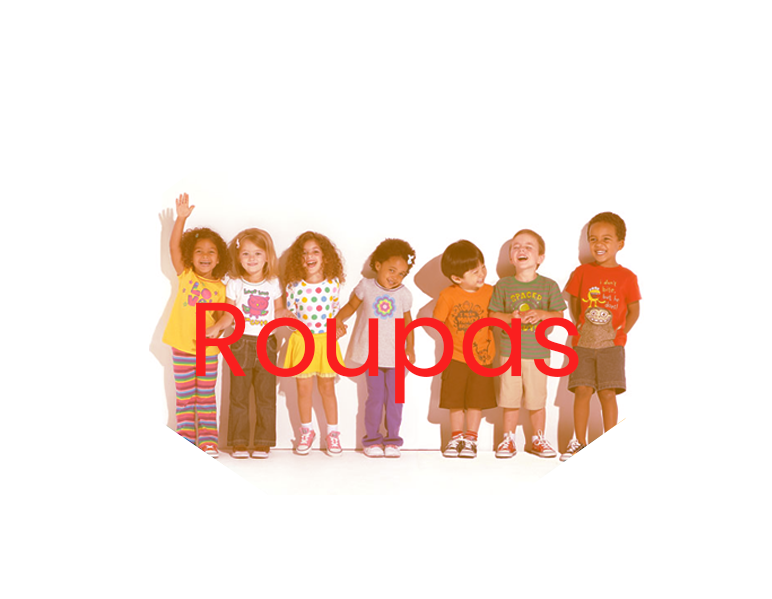
<style>
.page{position:relative;width:772px;height:599px;background:#ffffff}
.page>*{position:absolute;margin:0}
.t1{font:105.2px "Poppins-Regular";color:#fa1f1f}
</style>
<div class="page">
<p class="t1" style="left:196px;top:302px;width:383px;height:102px">Roupas</p>
</div>
